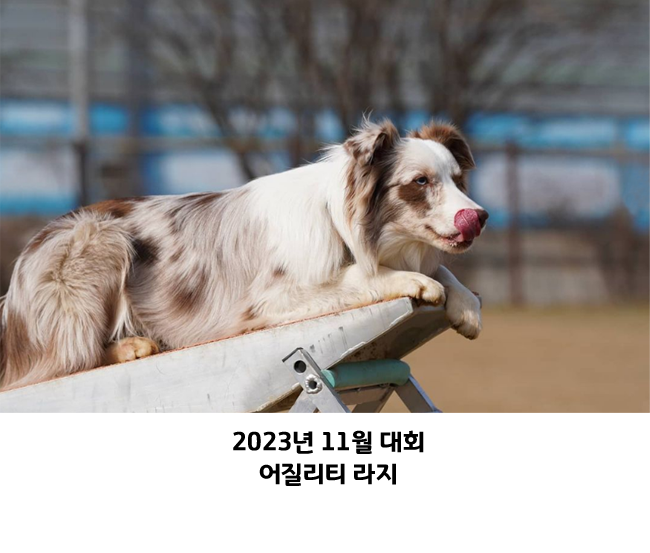
<style>
.page{position:relative;width:650px;height:553px;background:#ffffff}
.page>*{position:absolute;margin:0}
.t1{font:25.6px/32px "GyeonggiTitleB";color:#000000}
</style>
<div class="page">
<p class="t1" style="left:233px;top:430px;width:191px;height:56px;text-align:center">2023년 11월 대회<br>어질리티 라지</p>
</div>
